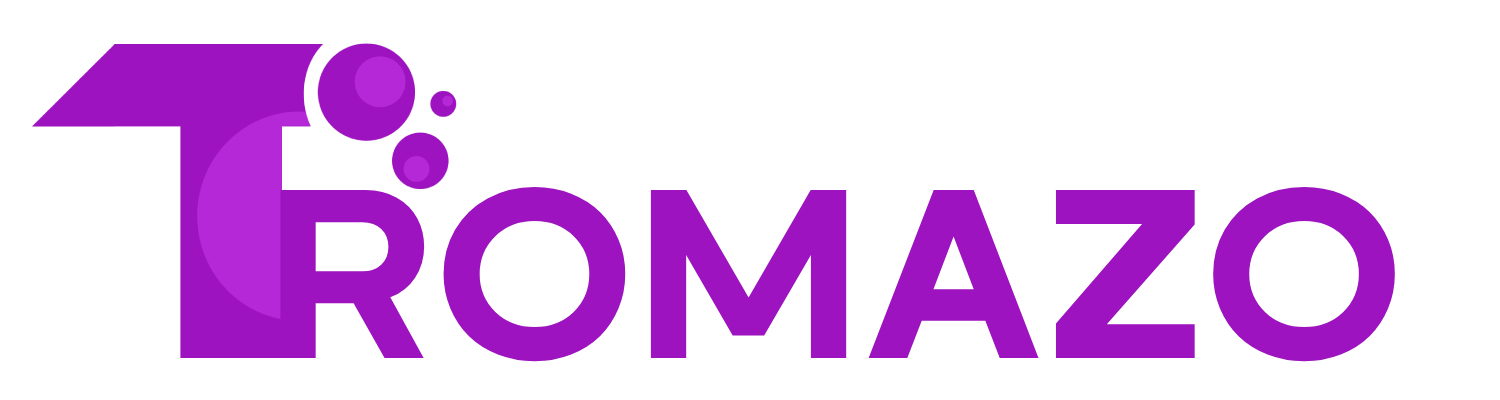
<style>
.page{position:relative;width:1500px;height:400px;background:#ffffff}
.page>*{position:absolute;margin:0}
.t1{font:239.9px "Laro-SemiBold";color:#9d13bf}
</style>
<div class="page">
<p class="t1" style="left:280px;top:186px;width:1115px;height:176px">ROMAZO</p>
</div>
